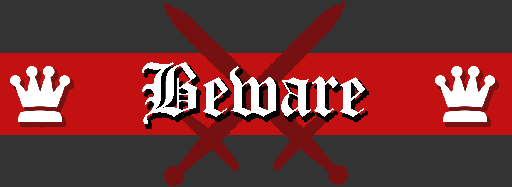
<style>
.page{position:relative;width:512px;height:187px;background:#333333}
.page>*{position:absolute;margin:0}
.t1{font:80px "Canterbury-Regular";color:#ffffff}
</style>
<div class="page">
<p class="t1" style="left:142px;top:62px;width:223px;height:62px">Beware</p>
</div>
